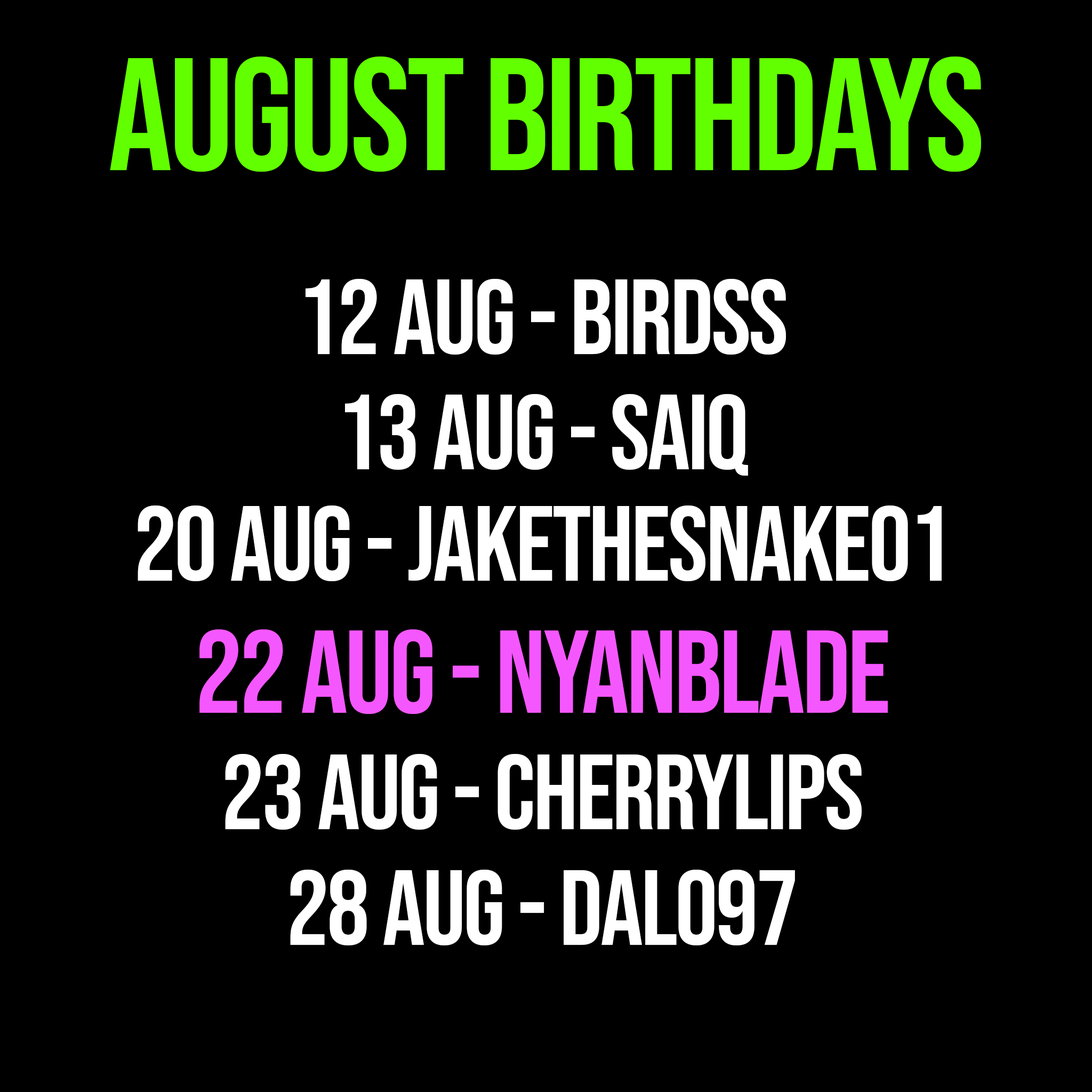
<style>
.page{position:relative;width:1092px;height:1092px;background:#000000}
.page>*{position:absolute;margin:0}
.t1{font:160px "BebasNeue-Regular";letter-spacing:-0.02em;color:#62ff00}
.t2{font:106.6px "BebasNeue-Regular";letter-spacing:-0.02em;color:#ffffff}
.t3{font:117.3px "BebasNeue-Regular";letter-spacing:-0.02em;color:#f557ff}
</style>
<div class="page">
<p class="t1" style="left:110px;top:57px;width:871px;height:115px">august birthdays</p>
<p class="t2" style="left:306px;top:279px;width:480px;height:76px">12 AUG - birdss</p>
<p class="t2" style="left:345px;top:394px;width:403px;height:82px">13 AUG - SAIQ</p>
<p class="t2" style="left:138px;top:505px;width:804px;height:76px">20 AUG - jakethesnake01</p>
<p class="t3" style="left:199px;top:629px;width:689px;height:85px">22 AUG - nyanblade</p>
<p class="t2" style="left:225px;top:754px;width:637px;height:76px">23 AUG - CHERRYLIPS</p>
<p class="t2" style="left:290px;top:870px;width:505px;height:75px">28 AUG - DALO97</p>
</div>
